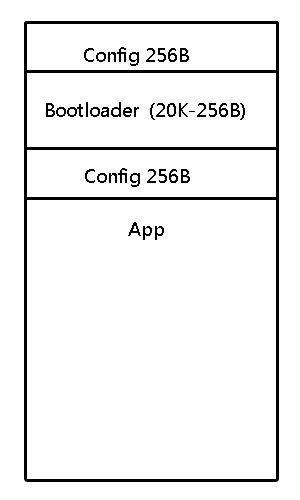
<style>
.page{position:relative;width:300px;height:500px;background:#ffffff}
.page>*{position:absolute;margin:0}
.t1{font:18px "MicrosoftYaHei";color:#030303}
</style>
<div class="page">
<p class="t1" style="left:84px;top:47px;width:105px;height:19px">Config 256B</p>
<p class="t1" style="left:46px;top:102px;width:199px;height:18px">Bootloader  (20K-256B)</p>
<p class="t1" style="left:85px;top:168px;width:105px;height:19px">Config 256B</p>
<p class="t1" style="left:128px;top:222px;width:36px;height:18px">App</p>
</div>
